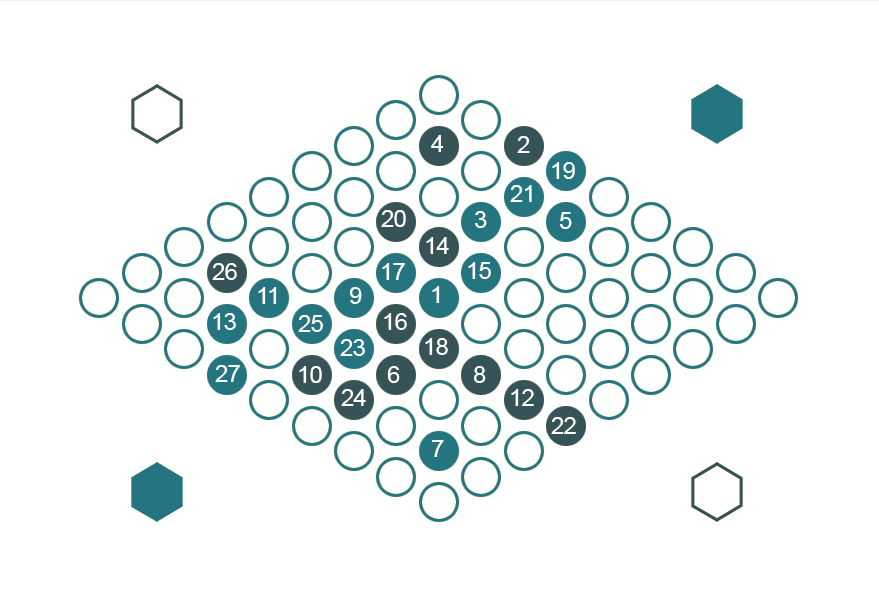
<style>
.page{position:relative;width:879px;height:591px;background:#ffffff}
.page>*{position:absolute;margin:0}
.t1{font:24px "ArialMT";letter-spacing:-0.025em;color:#ffffff}
</style>
<div class="page">
<p class="t1" style="left:431px;top:135px;width:13px;height:17px">4</p>
<p class="t1" style="left:517px;top:136px;width:13px;height:17px">2</p>
<p class="t1" style="left:552px;top:162px;width:23px;height:17px">19</p>
<p class="t1" style="left:510px;top:185px;width:22px;height:17px">21</p>
<p class="t1" style="left:381px;top:210px;width:25px;height:17px">20</p>
<p class="t1" style="left:475px;top:211px;width:12px;height:17px">3</p>
<p class="t1" style="left:560px;top:212px;width:12px;height:17px">5</p>
<p class="t1" style="left:426px;top:237px;width:23px;height:17px">14</p>
<p class="t1" style="left:212px;top:263px;width:25px;height:17px">26</p>
<p class="t1" style="left:382px;top:263px;width:23px;height:17px">17</p>
<p class="t1" style="left:468px;top:262px;width:23px;height:17px">15</p>
<p class="t1" style="left:258px;top:287px;width:19px;height:17px">11</p>
<p class="t1" style="left:349px;top:287px;width:13px;height:17px">9</p>
<p class="t1" style="left:432px;top:286px;width:8px;height:17px">1</p>
<p class="t1" style="left:213px;top:313px;width:23px;height:17px">13</p>
<p class="t1" style="left:298px;top:315px;width:25px;height:17px">25</p>
<p class="t1" style="left:384px;top:313px;width:23px;height:17px">16</p>
<p class="t1" style="left:340px;top:339px;width:25px;height:17px">23</p>
<p class="t1" style="left:425px;top:338px;width:23px;height:17px">18</p>
<p class="t1" style="left:215px;top:365px;width:25px;height:17px">27</p>
<p class="t1" style="left:299px;top:366px;width:23px;height:17px">10</p>
<p class="t1" style="left:387px;top:366px;width:13px;height:17px">6</p>
<p class="t1" style="left:474px;top:366px;width:12px;height:17px">8</p>
<p class="t1" style="left:341px;top:389px;width:25px;height:17px">24</p>
<p class="t1" style="left:511px;top:389px;width:23px;height:17px">12</p>
<p class="t1" style="left:551px;top:417px;width:25px;height:17px">22</p>
<p class="t1" style="left:431px;top:440px;width:13px;height:17px">7</p>
</div>
